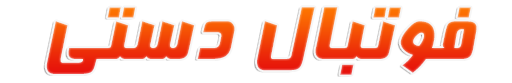
<style>
.page{position:relative;width:512px;height:83px;background:#ffffff}
.page>*{position:absolute;margin:0}
.t1{font:90px "BFarnaz"}
</style>
<div class="page">
<p class="t1" style="left:46px;top:7px;width:431px;height:68px">فوتبال دستی</p>
</div>
